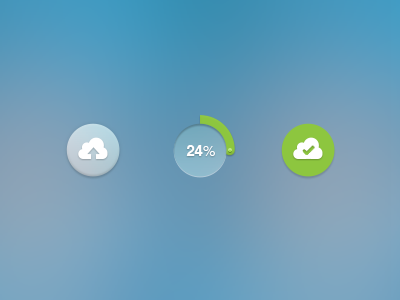
<style>
.page{position:relative;width:400px;height:300px}
.page>*{position:absolute;margin:0}
.t1{font:15px "Helvetica-Bold";color:#ffffff}
.t2{font:15px "Helvetica-Light";color:#ffffff}
</style>
<div class="page">
<p class="t1" style="left:186px;top:145px;width:29px;height:11px">24<span class="t2">%</span></p>
</div>
